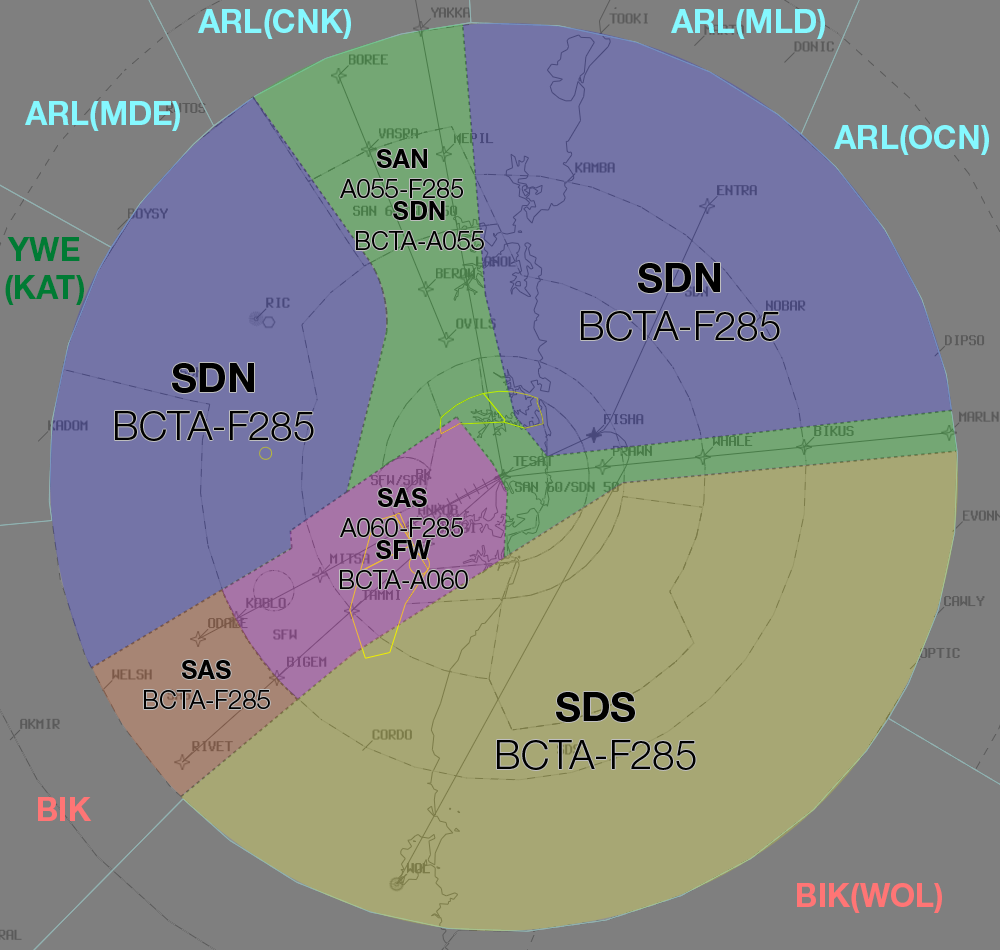
<style>
.page{position:relative;width:1000px;height:950px;background:#7f7f7f}
.page>*{position:absolute;margin:0}
.t1{font:32.2px "HelveticaNeueLTStd-Bd";color:#85f8ff}
.t2{font:25.3px "HelveticaNeueLTStd-Lt";color:#000000}
.t3{font:25.3px "HelveticaNeueLTStd-Bd";color:#000000}
.t4{font:32.2px "HelveticaNeueLTStd-Bd";color:#007b34}
.t5{font:40px "HelveticaNeueLTStd-Lt";color:#000000}
.t6{font:40px "HelveticaNeueLTStd-Bd";color:#000000}
.t7{font:32.2px "HelveticaNeueLTStd-Bd";color:#ff7575}
</style>
<div class="page">
<p class="t1" style="left:198px;top:9px;width:153px;height:30px">ARL(CNK)</p>
<p class="t1" style="left:671px;top:9px;width:154px;height:30px">ARL(MLD)</p>
<p class="t1" style="left:25px;top:101px;width:155px;height:30px">ARL(MDE)</p>
<p class="t1" style="left:834px;top:125px;width:155px;height:30px">ARL(OCN)</p>
<p class="t2" style="left:340px;top:149px;width:123px;height:49px;text-align:center"><span class="t3">SAN<br></span>A055-F285</p>
<p class="t2" style="left:356px;top:201px;width:128px;height:49px;text-align:center"><span class="t3">SDN<br></span>BCTA-A055</p>
<p class="t4" style="left:5px;top:237px;width:79px;height:68px;text-align:center">YWE<br>(KAT)</p>
<p class="t5" style="left:581px;top:263px;width:199px;height:78px;text-align:center"><span class="t6">SDN<br></span>BCTA-F285</p>
<p class="t5" style="left:115px;top:363px;width:199px;height:78px;text-align:center"><span class="t6">SDN<br></span>BCTA-F285</p>
<p class="t2" style="left:340px;top:488px;width:123px;height:49px;text-align:center"><span class="t3">SAS<br></span>A060-F285</p>
<p class="t2" style="left:340px;top:540px;width:128px;height:49px;text-align:center"><span class="t3">SFW<br></span>BCTA-A060</p>
<p class="t2" style="left:144px;top:660px;width:126px;height:49px;text-align:center"><span class="t3">SAS<br></span>BCTA-F285</p>
<p class="t5" style="left:497px;top:692px;width:199px;height:78px;text-align:center"><span class="t6">SDS<br></span>BCTA-F285</p>
<p class="t7" style="left:38px;top:797px;width:54px;height:24px">BIK</p>
<p class="t7" style="left:797px;top:883px;width:145px;height:30px">BIK(WOL)</p>
</div>
